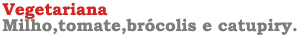
<style>
.page{position:relative;width:300px;height:50px;background:#ffffff}
.page>*{position:absolute;margin:0}
.t1{font:17px "BookmanOldStyle-Bold";color:#7c7c79}
</style>
<div class="page">
<p class="t1" style="left:2px;top:18px;width:295px;height:17px">Milho,tomate,brócolis e catupiry.</p>
</div>
